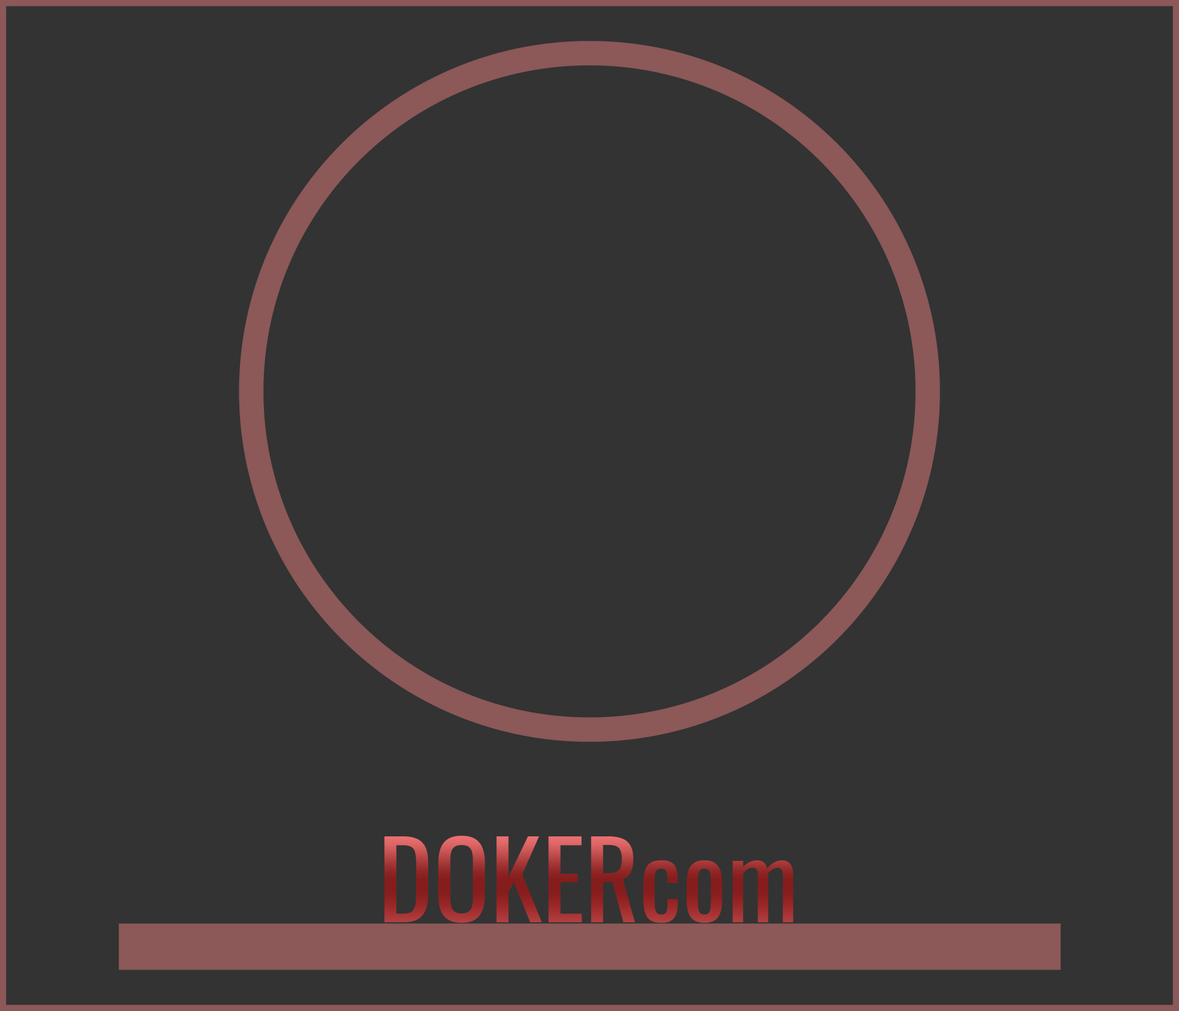
<style>
.page{position:relative;width:1179px;height:1011px;background:#333333}
.page>*{position:absolute;margin:0}
.t1{font:105.1px "Oswald-Regular"}
</style>
<div class="page">
<p class="t1" style="left:384px;top:836px;width:410px;height:87px">DOKERcom</p>
</div>
